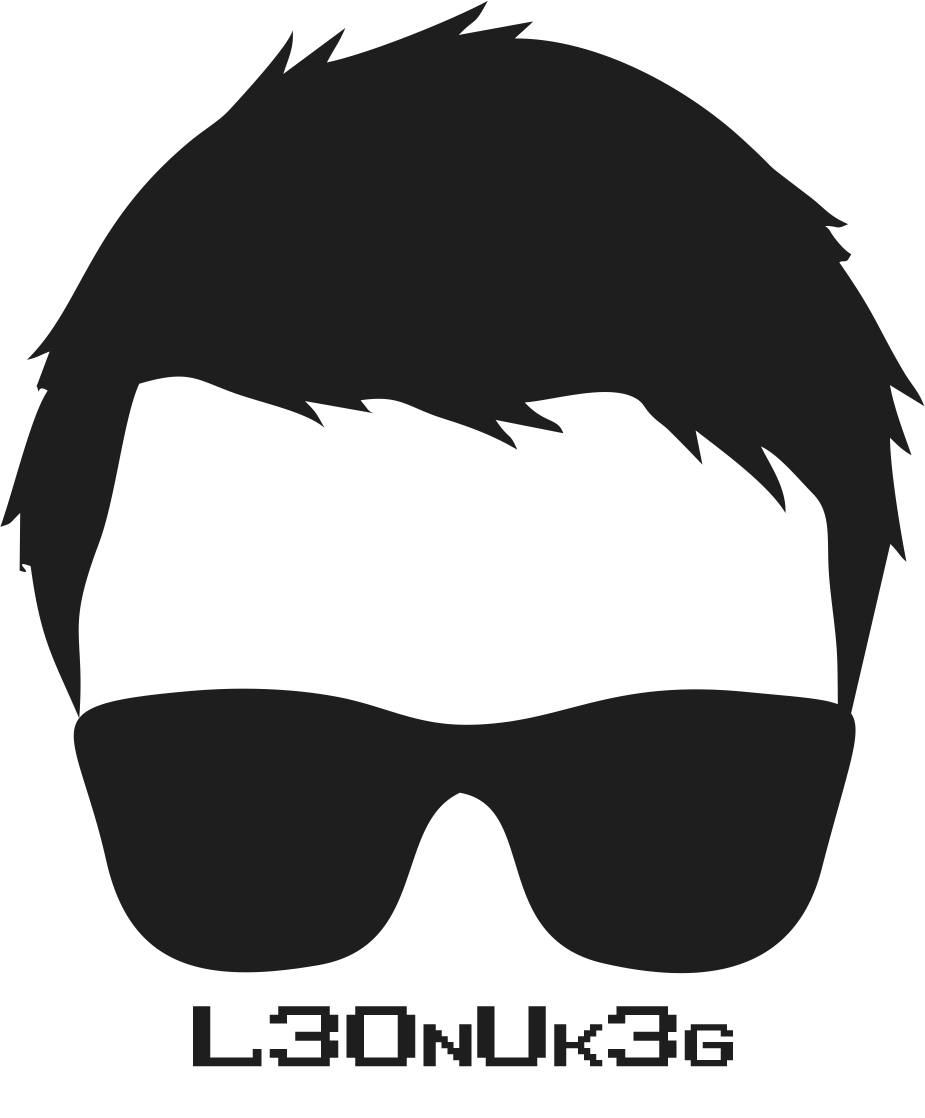
<style>
.page{position:relative;width:925px;height:1118px;background:#ffffff}
.page>*{position:absolute;margin:0}
.t1{font:76.9px "Super-Legend-Boy";color:#1e1e1e;font-variant:small-caps}
</style>
<div class="page">
<p class="t1" style="left:193px;top:1006px;width:540px;height:61px">L30nUk3g</p>
</div>
